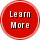
<style>
.page{position:relative;width:40px;height:40px;background:#d90b00}
.page>*{position:absolute;margin:0}
.t1{font:8px/11.2px "HelveticaNeue-BoldCond";letter-spacing:0.1em;color:#ffffff}
</style>
<div class="page">
<p class="t1" style="left:10px;top:11px;width:20px;height:17px;text-align:center">Learn<br>More</p>
</div>
